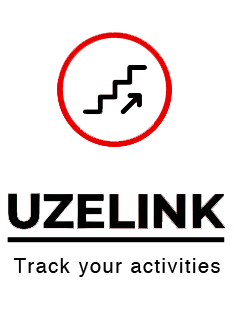
<style>
.page{position:relative;width:241px;height:333px;background:#ffffff}
.page>*{position:absolute;margin:0}
.t1{font:20px "Helvetica";letter-spacing:0.075em;color:#020202}
</style>
<div class="page">
<p class="t1" style="left:13px;top:258px;width:207px;height:19px">Track your activities</p>
</div>
